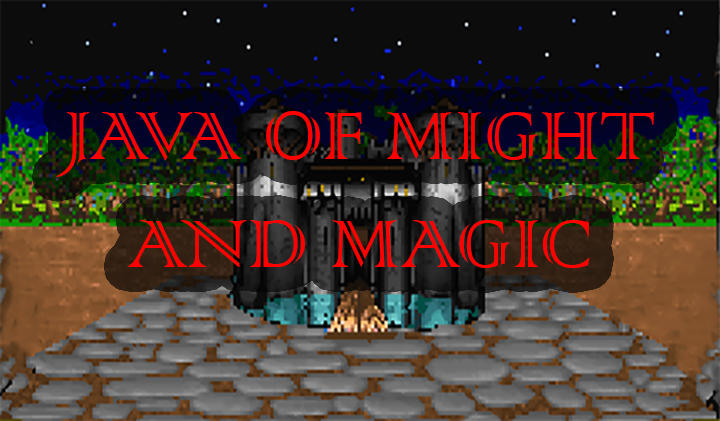
<style>
.page{position:relative;width:720px;height:421px}
.page>*{position:absolute;margin:0}
.t1{font:90px "ColonnaMT";color:#ff0000}
</style>
<div class="page">
<p class="t1" style="left:56px;top:111px;width:598px;height:157px;text-align:center">JAVA OF MIGHT AND MAGIC</p>
</div>
